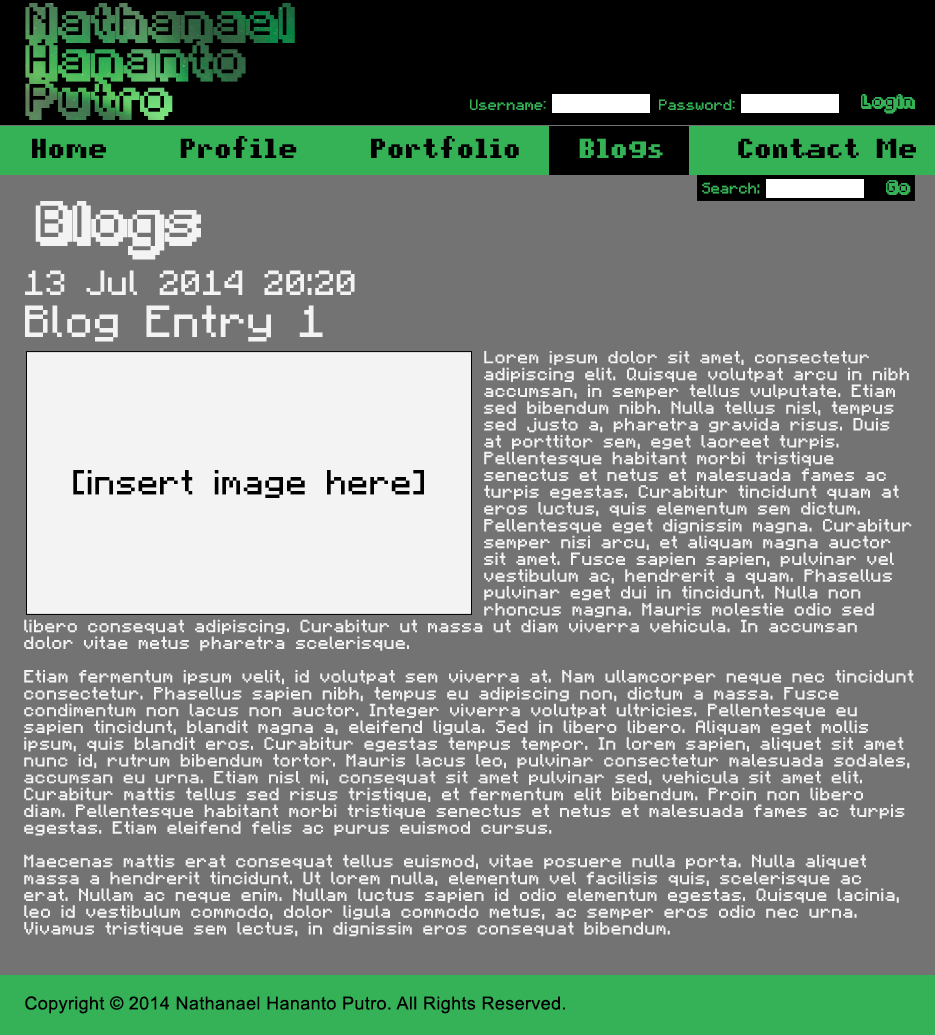
<style>
.page{position:relative;width:935px;height:1035px;background:#737373}
.page>*{position:absolute;margin:0}
.t1{font:32px "Fipps-Regular";letter-spacing:0.02em}
.t2{font:12px "pixelmix";letter-spacing:0.02em;color:#35b256}
.t3{font:12px "Fipps-Regular";letter-spacing:0.02em;color:#35b256}
.t4{font:22px "pixelmix-bold";letter-spacing:0.02em;color:#000000}
.t5{font:22px "pixelmix-bold";letter-spacing:0.02em;color:#35b256}
.t6{font:12px "Minecraftia";letter-spacing:0.02em;color:#35b256}
.t7{font:36px "Fipps-Regular";letter-spacing:0.02em;color:#f3f3f3}
.t8{font:28px "Minecraftia";letter-spacing:0.02em;color:#f3f3f3}
.t9{font:36px "Minecraftia";letter-spacing:0.02em;color:#f3f3f3}
.t10{font:14px "Minecraftia";letter-spacing:0.02em;color:#f3f3f3}
.t11{font:28px "Minecraftia";letter-spacing:0.02em;color:#000000}
.t12{font:18px "ArialMT";letter-spacing:0.02em;color:#000000}
</style>
<div class="page">
<p class="t1" style="left:25px;top:3px;width:270px;height:117px">Nathanael<br>Hananto<br>Putro</p>
<p class="t2" style="left:470px;top:99px;width:76px;height:11px">Username:</p>
<p class="t2" style="left:659px;top:99px;width:76px;height:11px">Password:</p>
<p class="t3" style="left:861px;top:94px;width:54px;height:20px">Login</p>
<p class="t4" style="left:32px;top:136px;width:884px;height:22px">Home     Profile     Portfolio    <span class="t5">Blogs</span>     Contact Me</p>
<p class="t6" style="left:702px;top:182px;width:58px;height:12px">Search:</p>
<p class="t3" style="left:886px;top:180px;width:25px;height:15px">Go</p>
<p class="t7" style="left:35px;top:201px;width:166px;height:59px">Blogs</p>
<p class="t8" style="left:25px;top:270px;width:330px;height:25px">13 Jul 2014 20:20</p>
<p class="t9" style="left:25px;top:305px;width:298px;height:37px">Blog Entry 1</p>
<p class="t10" style="left:24px;top:351px;width:890px;height:586px">Lorem ipsum dolor sit amet, consectetur<br>               adipiscing elit. Quisque volutpat arcu in nibh<br>               accumsan, in semper tellus vulputate. Etiam<br>               sed bibendum nibh. Nulla tellus nisl, tempus<br>               sed justo a, pharetra gravida risus. Duis<br>               at porttitor sem, eget laoreet turpis.<br>               Pellentesque habitant morbi tristique<br>               senectus et netus et malesuada fames ac<br>               turpis egestas. Curabitur tincidunt quam at<br>               eros luctus, quis elementum sem dictum.<br>               Pellentesque eget dignissim magna. Curabitur<br>               semper nisi arcu, et aliquam magna auctor<br>               sit amet. Fusce sapien sapien, pulvinar vel<br>               vestibulum ac, hendrerit a quam. Phasellus<br>               pulvinar eget dui in tincidunt. Nulla non<br>               rhoncus magna. Mauris molestie odio sed libero consequat adipiscing. Curabitur ut massa ut diam viverra vehicula. In accumsan dolor vitae metus pharetra scelerisque.<br><br>Etiam fermentum ipsum velit, id volutpat sem viverra at. Nam ullamcorper neque nec tincidunt consectetur. Phasellus sapien nibh, tempus eu adipiscing non, dictum a massa. Fusce condimentum non lacus non auctor. Integer viverra volutpat ultricies. Pellentesque eu sapien tincidunt, blandit magna a, eleifend ligula. Sed in libero libero. Aliquam eget mollis ipsum, quis blandit eros. Curabitur egestas tempus tempor. In lorem sapien, aliquet sit amet nunc id, rutrum bibendum tortor. Mauris lacus leo, pulvinar consectetur malesuada sodales, accumsan eu urna. Etiam nisl mi, consequat sit amet pulvinar sed, vehicula sit amet elit. Curabitur mattis tellus sed risus tristique, et fermentum elit bibendum. Proin non libero diam. Pellentesque habitant morbi tristique senectus et netus et malesuada fames ac turpis egestas. Etiam eleifend felis ac purus euismod cursus.<br><br>Maecenas mattis erat consequat tellus euismod, vitae posuere nulla porta. Nulla aliquet massa a hendrerit tincidunt. Ut lorem nulla, elementum vel facilisis quis, scelerisque ac erat. Nullam ac neque enim. Nullam luctus sapien id odio elementum egestas. Quisque lacinia, leo id vestibulum commodo, dolor ligula commodo metus, ac semper eros odio nec urna. Vivamus tristique sem lectus, in dignissim eros consequat bibendum.</p>
<p class="t11" style="left:73px;top:470px;width:351px;height:28px">[insert image here]</p>
<p class="t12" style="left:25px;top:996px;width:540px;height:18px">Copyright © 2014 Nathanael Hananto Putro. All Rights Reserved.</p>
</div>
